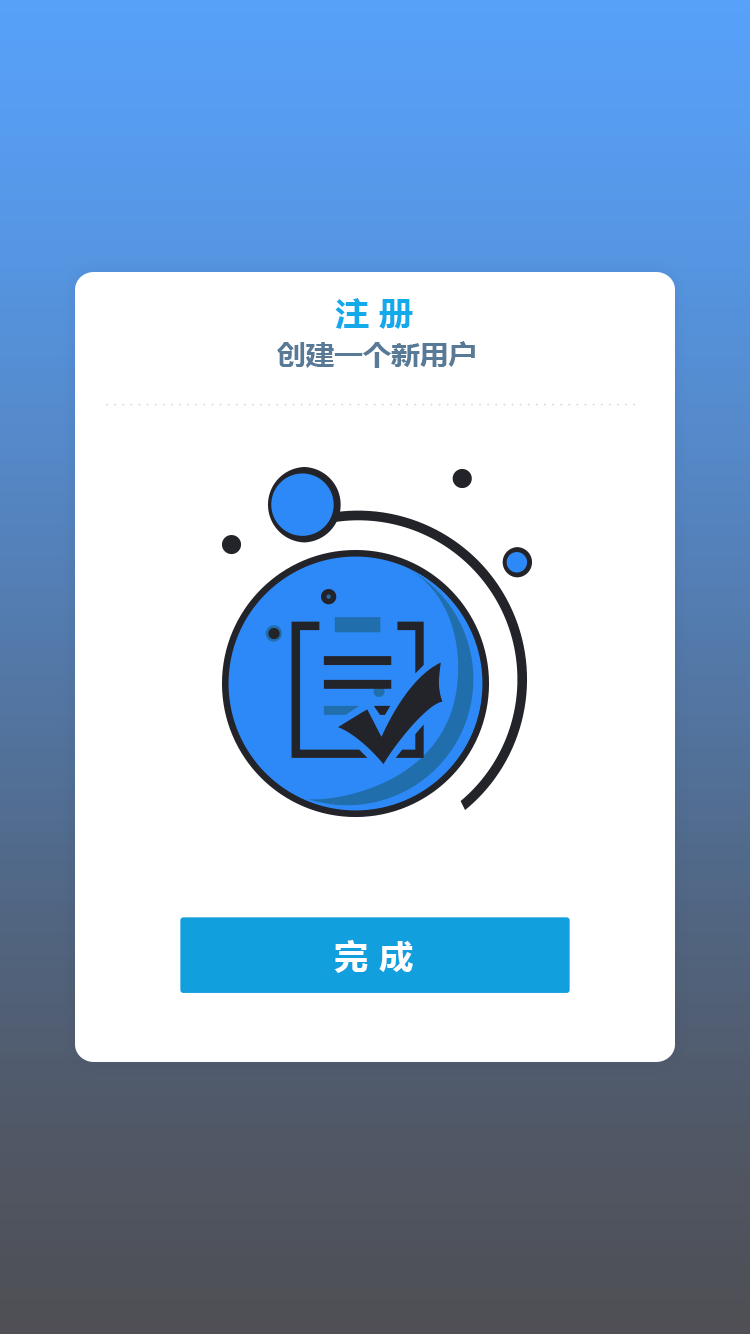
<style>
.page{position:relative;width:750px;height:1334px;background:#ffffff}
.page>*{position:absolute;margin:0}
.t1{font:32px "MicrosoftYaHei-Bold";color:#12aaeb;text-transform:uppercase;scale:1.07 1}
.t2{font:26.7px "MicrosoftYaHei-Bold";color:#597a96;text-transform:uppercase;scale:1.07 1}
.t3{font:32px "MicrosoftYaHei-Bold";color:#ffffff;text-transform:uppercase;scale:1.07 1}
</style>
<div class="page">
<p class="t1" style="left:335px;top:298px;width:78px;height:31px">注 册</p>
<p class="t2" style="left:277px;top:341px;width:198px;height:27px">创建一个新用户</p>
<p class="t3" style="left:334px;top:940px;width:79px;height:33px">完 成</p>
</div>
